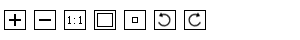
<style>
.page{position:relative;width:300px;height:40px;background:#ffffff}
.page>*{position:absolute;margin:0}
.t1{font:12px "BookmanOldStyle";color:#000000}
</style>
<div class="page">
<p class="t1" style="left:68px;top:16px;width:14px;height:8px">1:1</p>
</div>
